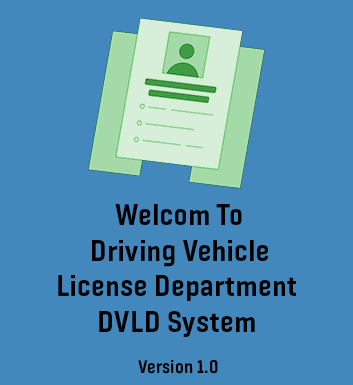
<style>
.page{position:relative;width:353px;height:385px;background:#4388bd}
.page>*{position:absolute;margin:0}
.t1{font:29.5px/35.4px "Fester_Trial-Bold";letter-spacing:0.01em;color:#000000}
.t2{font:18.3px "Fester_Trial-Bold";letter-spacing:0.01em;color:#000000}
</style>
<div class="page">
<p class="t1" style="left:58px;top:204px;width:238px;height:133px;text-align:center">Welcom To <br>Driving Vehicle <br>License Department<br>DVLD System</p>
<p class="t2" style="left:138px;top:360px;width:80px;height:14px">1.0 Version</p>
</div>
